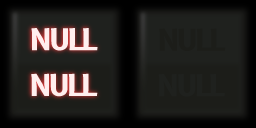
<style>
.page{position:relative;width:256px;height:128px}
.page>*{position:absolute;margin:0}
.t1{font:29.2px "B612-Bold";letter-spacing:-0.075em;color:#1c1d19}
.t2{font:29.2px "B612-Bold";letter-spacing:-0.075em;color:#1f211e}
</style>
<div class="page">
<p class="t1" style="left:159px;top:28px;width:67px;height:23px">NULL</p>
<p class="t2" style="left:158px;top:74px;width:67px;height:23px">NULL</p>
</div>
